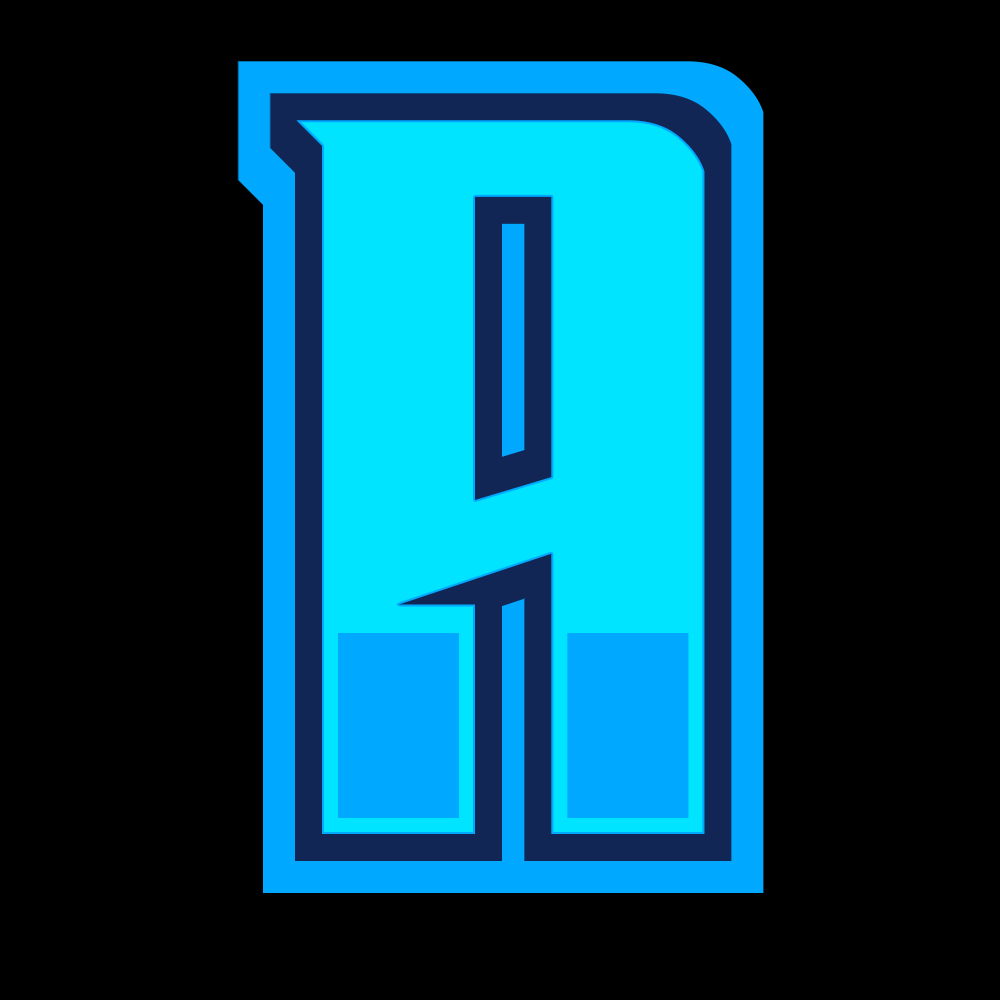
<style>
.page{position:relative;width:1000px;height:1000px;background:#000000}
.page>*{position:absolute;margin:0}
.t1{font:1044.1px "Subspace";color:#00e4ff}
</style>
<div class="page">
<p class="t1" style="left:296px;top:120px;width:409px;height:714px">A</p>
</div>
